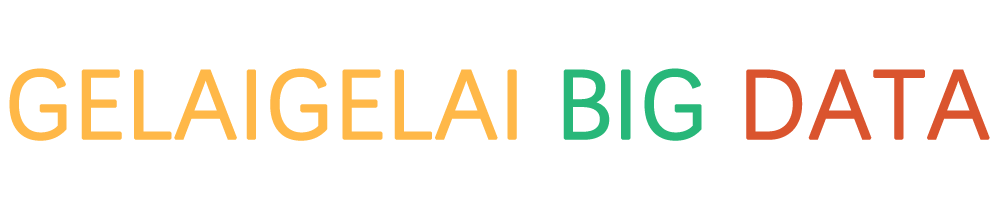
<style>
.page{position:relative;width:1000px;height:200px;background:#ffffff}
.page>*{position:absolute;margin:0}
.t1{font:97.9px "DengXian";color:#ffb848;font-weight:bold}
.t2{font:97.9px "DengXian";color:#28b779;font-weight:bold}
.t3{font:97.9px "DengXian";color:#da542e;font-weight:bold}
</style>
<div class="page">
<p class="t1" style="left:9px;top:68px;width:981px;height:73px">GELAIGELAI <span class="t2">BIG </span><span class="t3">DATA</span></p>
</div>
